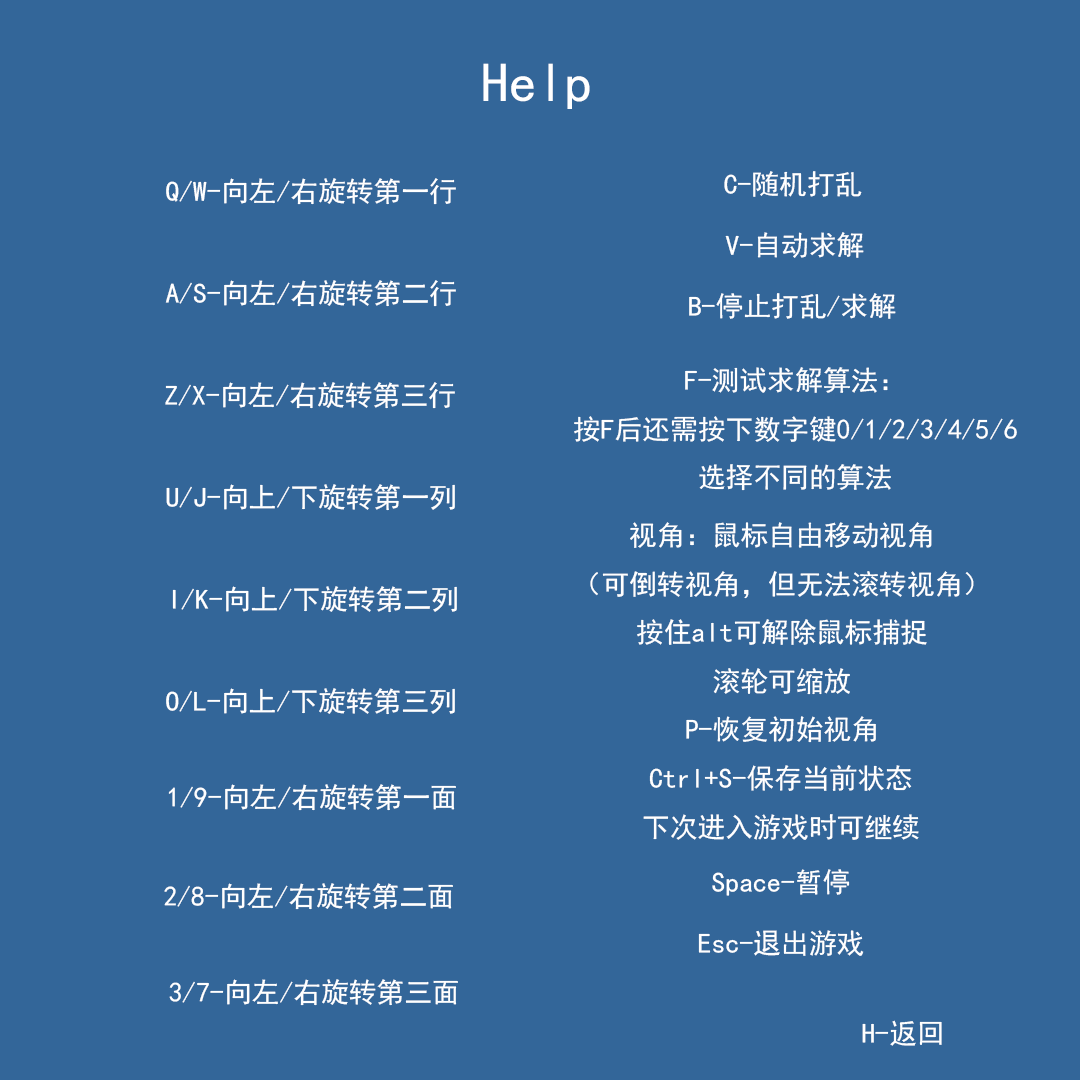
<style>
.page{position:relative;width:1080px;height:1080px;background:#336699}
.page>*{position:absolute;margin:0}
.t1{font:55.6px "SimHei";color:#ffffff}
.t2{font:27.8px "SimHei";color:#ffffff}
</style>
<div class="page">
<p class="t1" style="left:483px;top:63px;width:107px;height:46px">Help</p>
<p class="t2" style="left:724px;top:171px;width:138px;height:26px">C-随机打乱</p>
<p class="t2" style="left:166px;top:178px;width:290px;height:27px">Q/W-向左/右旋转第一行</p>
<p class="t2" style="left:725px;top:232px;width:139px;height:26px">V-自动求解</p>
<p class="t2" style="left:165px;top:280px;width:291px;height:27px">A/S-向左/右旋转第二行</p>
<p class="t2" style="left:689px;top:293px;width:207px;height:26px">B-停止打乱/求解</p>
<p class="t2" style="left:574px;top:367px;width:443px;height:124px;text-align:center">F-测试求解算法：<br>按F后还需按下数字键0/1/2/3/4/5/6<br>选择不同的算法</p>
<p class="t2" style="left:165px;top:382px;width:290px;height:27px">Z/X-向左/右旋转第三行</p>
<p class="t2" style="left:166px;top:484px;width:289px;height:27px">U/J-向上/下旋转第一列</p>
<p class="t2" style="left:590px;top:522px;width:384px;height:221px;text-align:center">视角：鼠标自由移动视角<br>（可倒转视角，但无法滚转视角）<br>按住alt可解除鼠标捕捉<br>滚轮可缩放<br>P-恢复初始视角</p>
<p class="t2" style="left:172px;top:586px;width:285px;height:27px">I/K-向上/下旋转第二列</p>
<p class="t2" style="left:166px;top:688px;width:289px;height:27px">O/L-向上/下旋转第三列</p>
<p class="t2" style="left:643px;top:765px;width:276px;height:75px;text-align:center">Ctrl+S-保存当前状态<br>下次进入游戏时可继续</p>
<p class="t2" style="left:168px;top:784px;width:288px;height:27px">1/9-向左/右旋转第一面</p>
<p class="t2" style="left:712px;top:869px;width:138px;height:27px">Space-暂停</p>
<p class="t2" style="left:164px;top:883px;width:289px;height:27px">2/8-向左/右旋转第二面</p>
<p class="t2" style="left:698px;top:930px;width:166px;height:26px">Esc-退出游戏</p>
<p class="t2" style="left:169px;top:979px;width:289px;height:27px">3/7-向左/右旋转第三面</p>
<p class="t2" style="left:862px;top:1020px;width:80px;height:26px">H-返回</p>
</div>
